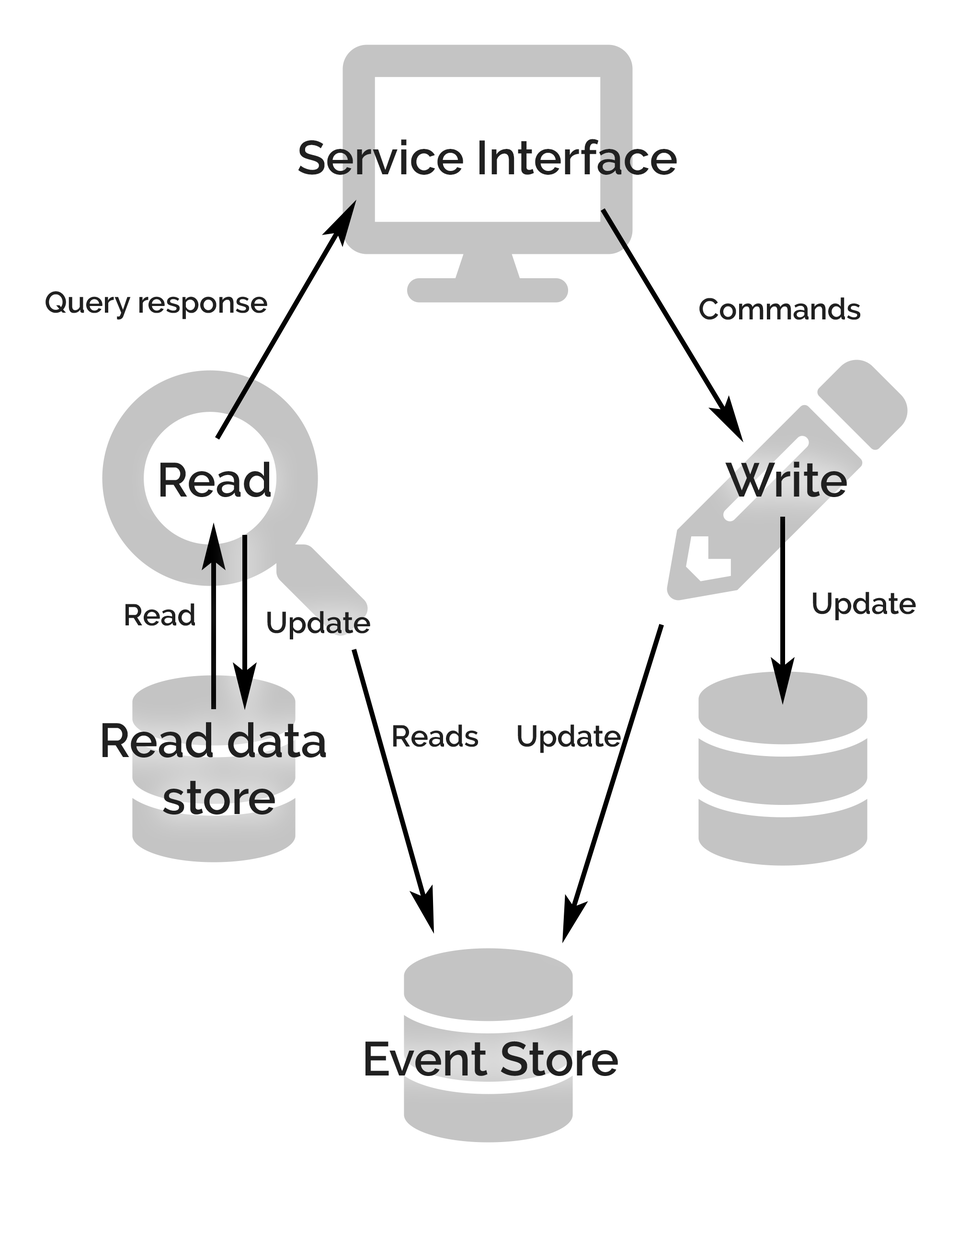
<style>
.page{position:relative;width:958px;height:1245px;background:#ffffff}
.page>*{position:absolute;margin:0}
.t1{font:47.6px "Raleway-SemiBold";color:#202020}
.t2{font:29.9px "Raleway-SemiBold";color:#202020}
</style>
<div class="page">
<p class="t1" style="left:298px;top:139px;width:379px;height:36px">Service Interface</p>
<p class="t2" style="left:45px;top:291px;width:222px;height:29px">Query response</p>
<p class="t2" style="left:699px;top:297px;width:162px;height:23px">Commands</p>
<p class="t1" style="left:160px;top:462px;width:111px;height:35px">Read</p>
<p class="t1" style="left:725px;top:462px;width:122px;height:35px">Write</p>
<p class="t2" style="left:813px;top:592px;width:103px;height:29px">Update</p>
<p class="t2" style="left:125px;top:603px;width:70px;height:23px">Read</p>
<p class="t2" style="left:267px;top:611px;width:103px;height:29px">Update</p>
<p class="t1" style="left:102px;top:722px;width:224px;height:93px;text-align:center">Read data <br>store</p>
<p class="t2" style="left:393px;top:725px;width:85px;height:22px">Reads</p>
<p class="t2" style="left:518px;top:725px;width:103px;height:28px">Update</p>
<p class="t1" style="left:365px;top:1041px;width:253px;height:35px">Event Store</p>
</div>
